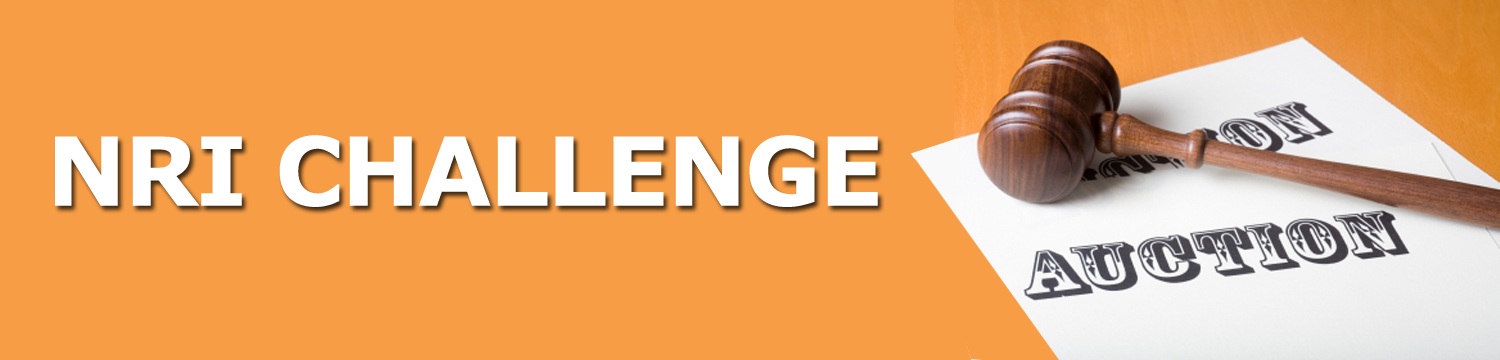
<style>
.page{position:relative;width:1500px;height:360px;background:#f79d46}
.page>*{position:absolute;margin:0}
.t1{font:94.6px "Verdana-Bold";letter-spacing:-0.025em;color:#ffffff;font-variant:small-caps}
</style>
<div class="page">
<p class="t1" style="left:55px;top:135px;width:823px;height:72px">NRI CHALLENGE</p>
</div>
